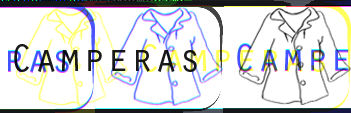
<style>
.page{position:relative;width:351px;height:113px;background:#ffffff}
.page>*{position:absolute;margin:0}
.t1{font:40px "OratorStd"}
</style>
<div class="page">
<p class="t1" style="left:142px;top:43px;width:183px;height:28px">Camperas</p>
</div>
